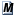
<style>
.page{position:relative;width:16px;height:16px;background:#ffffff}
.page>*{position:absolute;margin:0}
.t1{font:12px "Arial-BoldItalicMT";color:#000000}
</style>
<div class="page">
<p class="t1" style="left:3px;top:3px;width:11px;height:9px">M</p>
</div>
